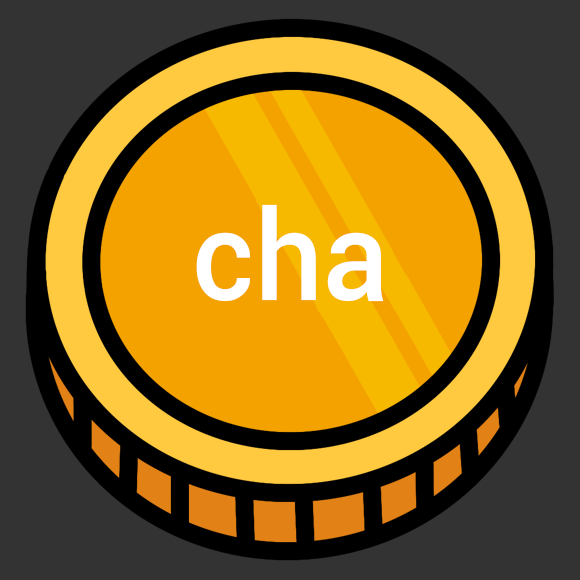
<style>
.page{position:relative;width:580px;height:580px;background:#333333}
.page>*{position:absolute;margin:0}
.t1{font:123.5px "Roboto-Medium";color:#ffffff}
</style>
<div class="page">
<p class="t1" style="left:196px;top:204px;width:188px;height:98px">cha</p>
</div>
